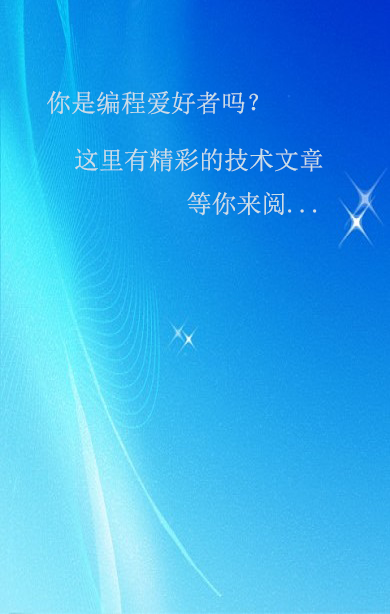
<style>
.page{position:relative;width:390px;height:614px}
.page>*{position:absolute;margin:0}
.t1{font:25px "SimSun";color:#cbdee7}
</style>
<div class="page">
<p class="t1" style="left:47px;top:91px;width:211px;height:24px">你是编程爱好者吗？</p>
<p class="t1" style="left:75px;top:148px;width:248px;height:68px">这里有精彩的技术文章<br>         等你来阅...</p>
</div>
